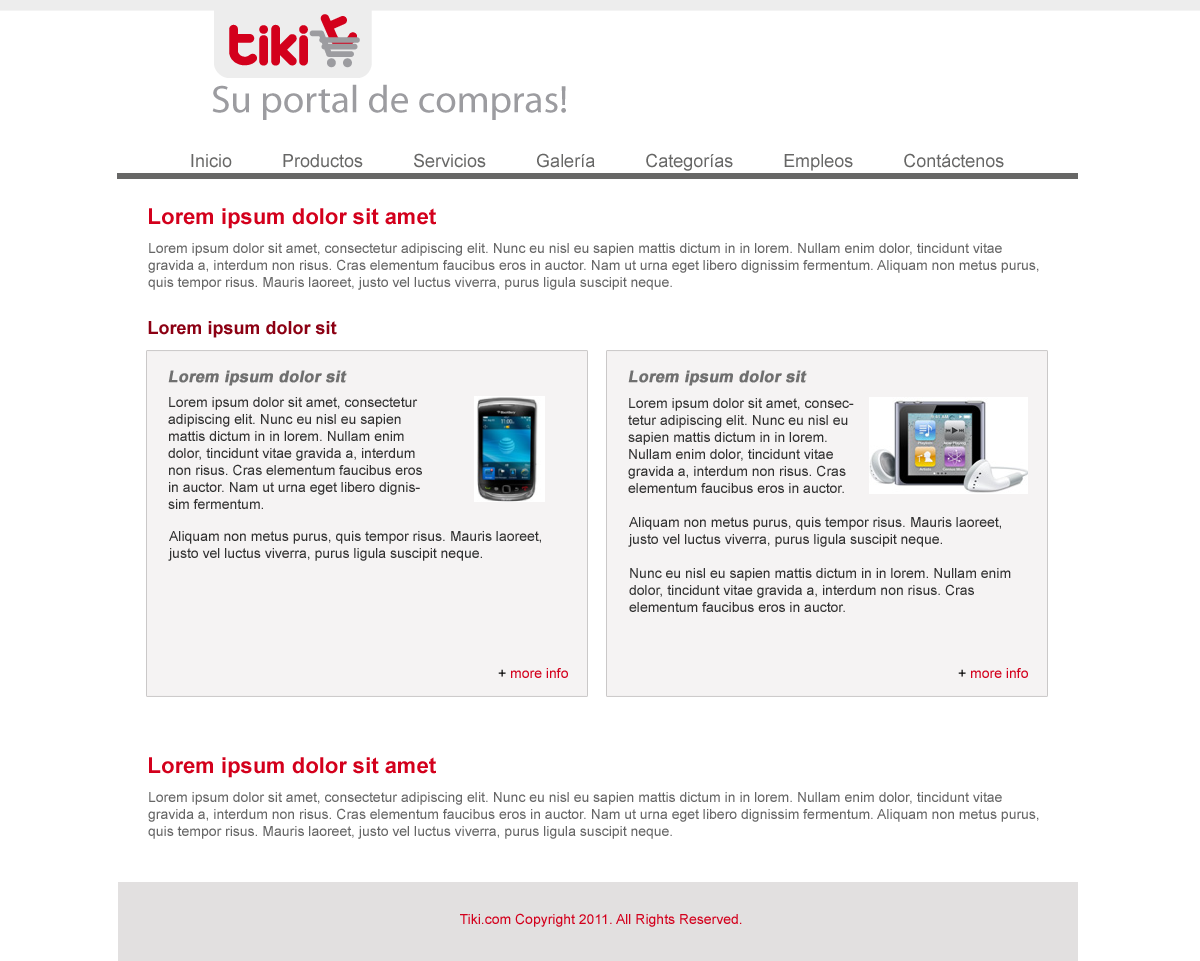
<style>
.page{position:relative;width:1200px;height:961px;background:#ffffff}
.page>*{position:absolute;margin:0}
.t1{font:18px "ArialMT";color:#676766}
.t2{font:22px "Arial-BoldMT";color:#d3001c}
.t3{font:14px/17px "ArialMT";color:#666666}
.t4{font:18px "Arial-BoldMT";color:#8c0013}
.t5{font:16px "Arial-BoldMT";color:#707070;font-weight:bold;font-style:italic}
.t6{font:14px/17px "ArialMT";color:#313131}
.t7{font:14px "ArialMT";color:#d3001c}
.t8{font:14px "ArialMT";color:#000000}
</style>
<div class="page">
<p class="t1" style="left:191px;top:153px;width:813px;height:18px">Inicio          Productos          Servicios          Galería          Categorías          Empleos          Contáctenos</p>
<p class="t2" style="left:149px;top:208px;width:287px;height:21px">Lorem ipsum dolor sit amet</p>
<p class="t3" style="left:148px;top:243px;width:891px;height:47px">Lorem ipsum dolor sit amet, consectetur adipiscing elit. Nunc eu nisl eu sapien mattis dictum in in lorem. Nullam enim dolor, tincidunt vitae gravida a, interdum non risus. Cras elementum faucibus eros in auctor. Nam ut urna eget libero dignissim fermentum. Aliquam non metus purus, quis tempor risus. Mauris laoreet, justo vel luctus viverra, purus ligula suscipit neque.</p>
<p class="t4" style="left:148px;top:321px;width:189px;height:17px">Lorem ipsum dolor sit</p>
<p class="t5" style="left:168px;top:370px;width:179px;height:16px">Lorem ipsum dolor sit</p>
<p class="t5" style="left:628px;top:370px;width:179px;height:16px">Lorem ipsum dolor sit</p>
<p class="t6" style="left:168px;top:397px;width:254px;height:112px">Lorem ipsum dolor sit amet, consectetur adipiscing elit. Nunc eu nisl eu sapien mattis dictum in in lorem. Nullam enim dolor, tincidunt vitae gravida a, interdum non risus. Cras elementum faucibus eros in auctor. Nam ut urna eget libero dignissim fermentum.</p>
<p class="t6" style="left:628px;top:398px;width:226px;height:95px">Lorem ipsum dolor sit amet, consectetur adipiscing elit. Nunc eu nisl eu sapien mattis dictum in in lorem. Nullam enim dolor, tincidunt vitae gravida a, interdum non risus. Cras elementum faucibus eros in auctor.</p>
<p class="t6" style="left:628px;top:517px;width:383px;height:95px">Aliquam non metus purus, quis tempor risus. Mauris laoreet, justo vel luctus viverra, purus ligula suscipit neque.<br><br>Nunc eu nisl eu sapien mattis dictum in in lorem. Nullam enim dolor, tincidunt vitae gravida a, interdum non risus. Cras elementum faucibus eros in auctor.</p>
<p class="t6" style="left:168px;top:531px;width:373px;height:30px">Aliquam non metus purus, quis tempor risus. Mauris laoreet, justo vel luctus viverra, purus ligula suscipit neque.</p>
<p class="t7" style="left:498px;top:668px;width:70px;height:10px"><span class="t8">+ </span>more info</p>
<p class="t7" style="left:958px;top:668px;width:70px;height:10px"><span class="t8">+ </span>more info</p>
<p class="t2" style="left:149px;top:757px;width:287px;height:21px">Lorem ipsum dolor sit amet</p>
<p class="t3" style="left:148px;top:792px;width:891px;height:47px">Lorem ipsum dolor sit amet, consectetur adipiscing elit. Nunc eu nisl eu sapien mattis dictum in in lorem. Nullam enim dolor, tincidunt vitae gravida a, interdum non risus. Cras elementum faucibus eros in auctor. Nam ut urna eget libero dignissim fermentum. Aliquam non metus purus, quis tempor risus. Mauris laoreet, justo vel luctus viverra, purus ligula suscipit neque.</p>
<p class="t7" style="left:460px;top:913px;width:282px;height:14px">Tiki.com Copyright 2011. All Rights Reserved.</p>
</div>
